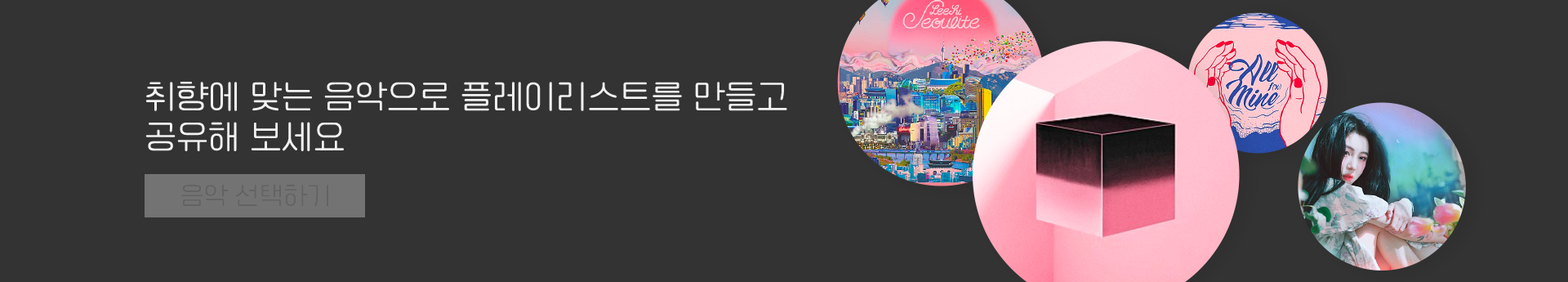
<style>
.page{position:relative;width:1568px;height:282px;background:#333333}
.page>*{position:absolute;margin:0}
.t1{font:33.5px "Cafe24Ssurroundair";color:#f2f2f2}
.t2{font:25.3px "Cafe24Ssurroundair";color:#636363}
</style>
<div class="page">
<p class="t1" style="left:145px;top:82px;width:642px;height:69px">취향에 맞는 음악으로 플레이리스트를 만들고<br>공유해 보세요</p>
<p class="t2" style="left:180px;top:184px;width:149px;height:23px">음악 선택하기</p>
</div>
